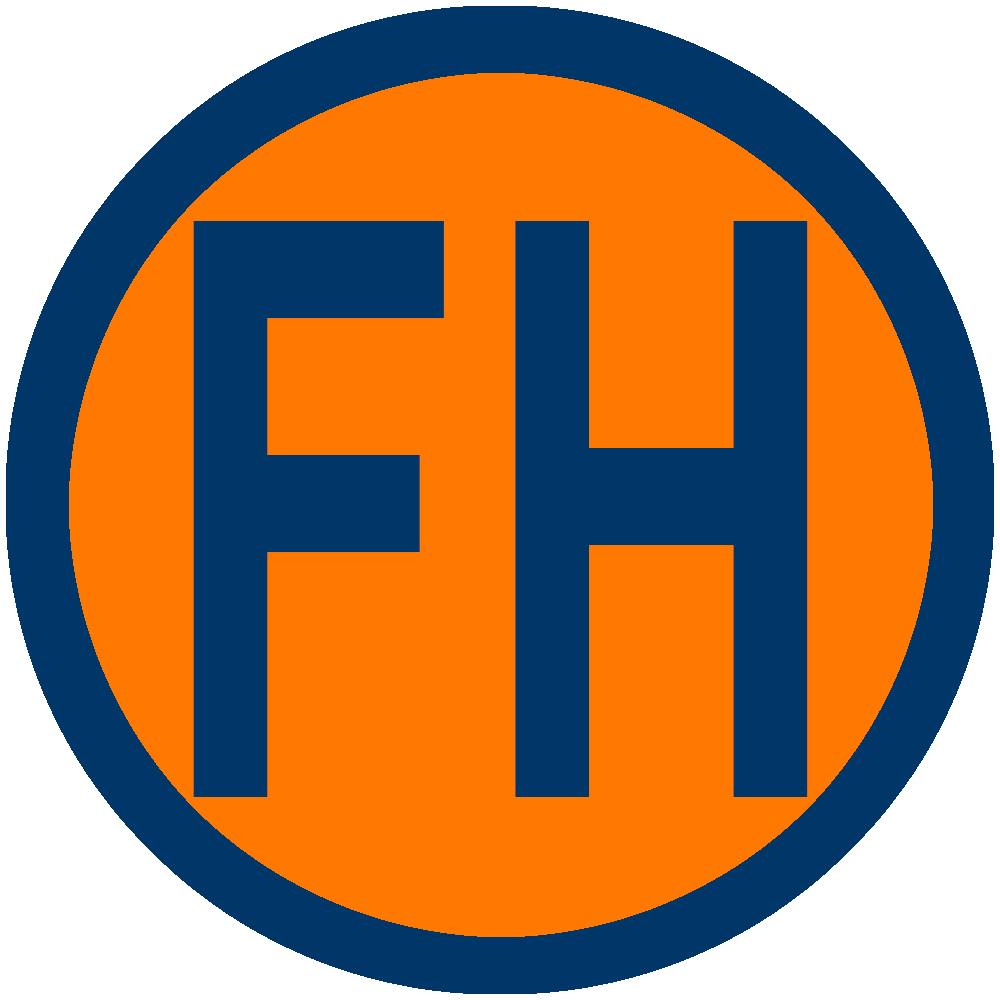
<style>
.page{position:relative;width:1000px;height:1000px;background:#ff7901}
.page>*{position:absolute;margin:0}
.t1{font:804.6px "Arial-BoldMT";letter-spacing:0.02em;color:#013668;scale:0.63 1}
</style>
<div class="page">
<p class="t1" style="left:193px;top:221px;width:615px;height:576px">FH</p>
</div>
